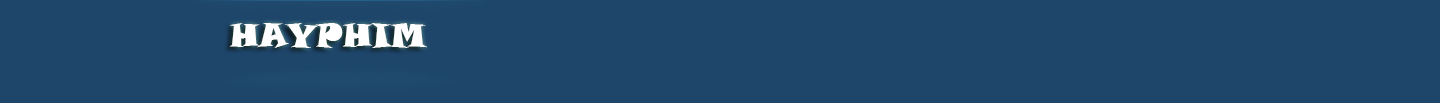
<style>
.page{position:relative;width:1440px;height:103px;background:#1e466a}
.page>*{position:absolute;margin:0}
.t1{font:33px "SnapITC-Regular";color:#ffffff}
</style>
<div class="page">
<p class="t1" style="left:229px;top:23px;width:198px;height:25px">HAYPHIM</p>
</div>
